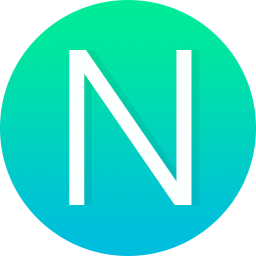
<style>
.page{position:relative;width:256px;height:256px;background:#ffffff}
.page>*{position:absolute;margin:0}
.t1{font:216.7px "HelveticaNeue-Light";letter-spacing:-0.04em;color:#fbfffd}
</style>
<div class="page">
<p class="t1" style="left:69px;top:50px;width:123px;height:155px">N</p>
</div>
